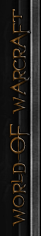
<style>
.page{position:relative;width:41px;height:236px}
.page>*{position:absolute;margin:0}
.t1{font:32px "Evanescent"}
</style>
<div class="page">
<p class="t1" style="left:9px;top:9px;width:22px;height:218px;rotate:-90deg">world OF warcraft</p>
</div>
